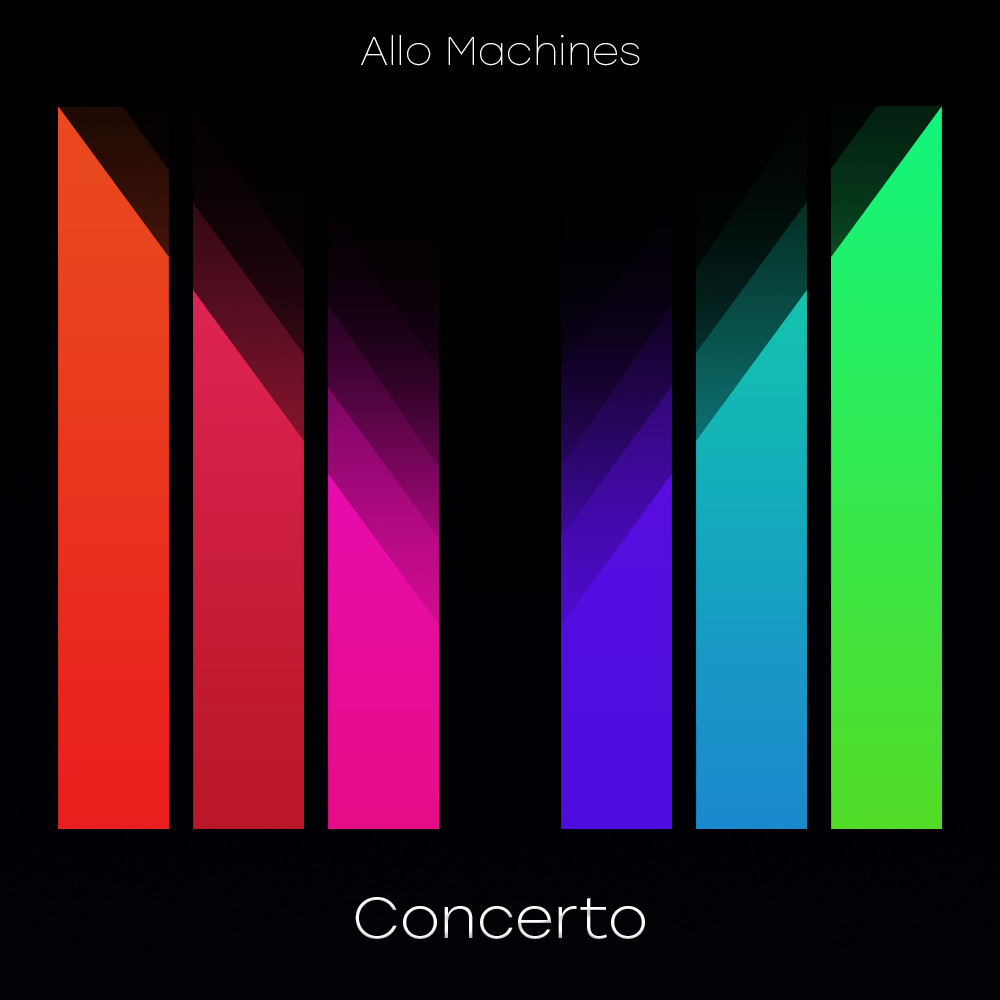
<style>
.page{position:relative;width:1000px;height:1000px}
.page>*{position:absolute;margin:0}
.t1{font:39px "Stolzl-Thin";letter-spacing:0.005em;color:#ffffff;scale:1.04 1}
.t2{font:56.7px "Stolzl-Light";letter-spacing:0.005em;color:#ffffff;scale:1.04 1}
</style>
<div class="page">
<p class="t1" style="left:361px;top:35px;width:279px;height:31px">Allo Machines</p>
<p class="t2" style="left:355px;top:897px;width:290px;height:42px">Concerto</p>
</div>
